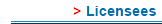
<style>
.page{position:relative;width:162px;height:24px;background:#ffffff}
.page>*{position:absolute;margin:0}
.t1{font:14px "Arial-BoldMT";letter-spacing:0.025em;color:#006fad}
.t2{font:14px "Arial-BoldMT";letter-spacing:0.025em;color:#ff0000}
</style>
<div class="page">
<p class="t1" style="left:73px;top:6px;width:83px;height:10px"><span class="t2">&gt; </span>Licensees</p>
</div>
